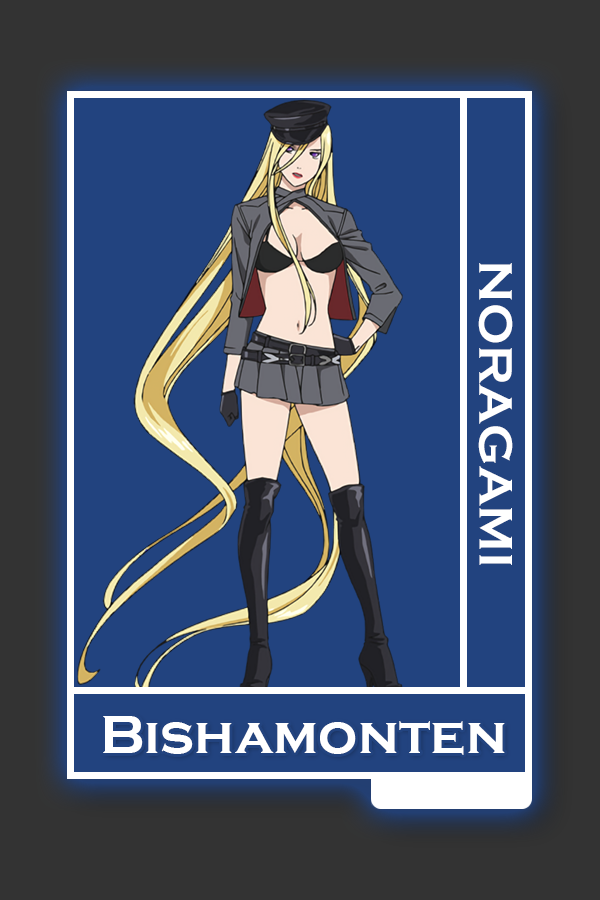
<style>
.page{position:relative;width:600px;height:900px;background:#22437f}
.page>*{position:absolute;margin:0}
.t1{font:48.8px "CopperplateGothic-Bold";color:#ffffff}
.t2{font:55.4px "CopperplateGothic-Bold";color:#ffffff}
</style>
<div class="page">
<p class="t1" style="left:478px;top:263px;width:35px;height:302px;rotate:90deg">NORAGAMI</p>
<p class="t2" style="left:103px;top:716px;width:402px;height:39px">Bishamonten</p>
</div>
